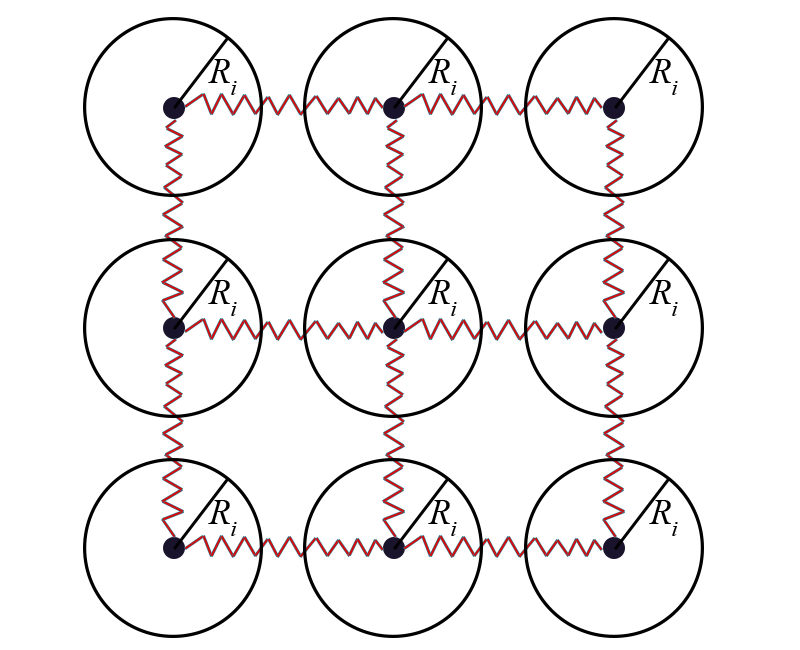
<style>
.page{position:relative;width:800px;height:650px;background:#ffffff}
.page>*{position:absolute;margin:0}
.t1{font:36px "TimesNewRomanPS-ItalicMT";color:#000000}
</style>
<div class="page">
<p class="t1" style="left:208px;top:59px;width:29px;height:36px">Ri</p>
<p class="t1" style="left:428px;top:59px;width:29px;height:36px">Ri</p>
<p class="t1" style="left:649px;top:59px;width:29px;height:36px">Ri</p>
<p class="t1" style="left:208px;top:280px;width:29px;height:36px">Ri</p>
<p class="t1" style="left:428px;top:280px;width:29px;height:36px">Ri</p>
<p class="t1" style="left:649px;top:280px;width:29px;height:36px">Ri</p>
<p class="t1" style="left:208px;top:500px;width:29px;height:36px">Ri</p>
<p class="t1" style="left:428px;top:500px;width:29px;height:36px">Ri</p>
<p class="t1" style="left:649px;top:500px;width:29px;height:36px">Ri</p>
</div>
